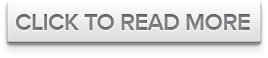
<style>
.page{position:relative;width:268px;height:58px}
.page>*{position:absolute;margin:0}
.t1{font:24px "ProximaNova-Semibold";letter-spacing:-0.025em;color:#787a7d;text-transform:uppercase}
</style>
<div class="page">
<p class="t1" style="left:16px;top:14px;width:234px;height:16px">Click to Read More</p>
</div>
